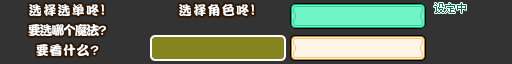
<style>
.page{position:relative;width:512px;height:64px;background:#333333}
.page>*{position:absolute;margin:0}
.t1{font:13px "DFPKanTingLiuW9";letter-spacing:0.1em;color:#ffffff}
.t2{font:15px "DFPKanTingLiuW9";letter-spacing:0.1em;color:#ffffff}
.t3{font:11px "ZpixEX2";color:#017149}
.t4{font:13px "DFPKanTingLiuW9";letter-spacing:-0.1em;color:#ffffff}
.t5{font:13px "DFPKanTingLiuW9";letter-spacing:0.05em;color:#ffffff}
</style>
<div class="page">
<p class="t1" style="left:29px;top:4px;width:75px;height:12px">选择选单咚<span class="t2">!</span></p>
<p class="t1" style="left:179px;top:4px;width:75px;height:12px">选择角色咚<span class="t2">!</span></p>
<p class="t3" style="left:434px;top:3px;width:32px;height:10px">设定中</p>
<p class="t4" style="left:28px;top:24px;width:78px;height:12px">要选哪个魔法?</p>
<p class="t5" style="left:36px;top:44px;width:63px;height:12px">要看什么?</p>
</div>
